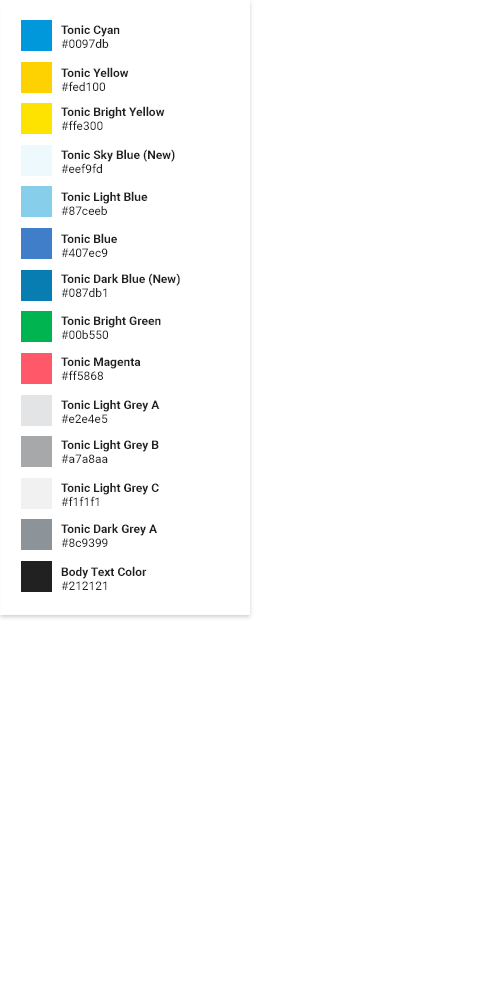
<style>
.page{position:relative;width:500px;height:1000px;background:#ffffff}
.page>*{position:absolute;margin:0}
.t1{font:12px "Roboto-Bold";color:#212121}
.t2{font:12px "Roboto-Regular";color:#212121}
</style>
<div class="page">
<p class="t1" style="left:61px;top:25px;width:59px;height:12px">Tonic Cyan</p>
<p class="t2" style="left:61px;top:39px;width:48px;height:9px">#0097db</p>
<p class="t1" style="left:61px;top:67px;width:68px;height:10px">Tonic Yellow</p>
<p class="t2" style="left:61px;top:81px;width:44px;height:10px">#fed100</p>
<p class="t1" style="left:61px;top:106px;width:104px;height:13px">Tonic Bright Yellow</p>
<p class="t2" style="left:61px;top:120px;width:42px;height:10px">#ffe300</p>
<p class="t1" style="left:61px;top:149px;width:114px;height:13px">Tonic Sky Blue (New)</p>
<p class="t2" style="left:61px;top:163px;width:41px;height:10px">#eef9fd</p>
<p class="t1" style="left:61px;top:191px;width:87px;height:13px">Tonic Light Blue</p>
<p class="t2" style="left:61px;top:206px;width:46px;height:9px">#87ceeb</p>
<p class="t1" style="left:61px;top:233px;width:56px;height:10px">Tonic Blue</p>
<p class="t2" style="left:61px;top:248px;width:47px;height:9px">#407ec9</p>
<p class="t1" style="left:61px;top:273px;width:119px;height:13px">Tonic Dark Blue (New)</p>
<p class="t2" style="left:61px;top:288px;width:46px;height:9px">#087db1</p>
<p class="t1" style="left:61px;top:316px;width:100px;height:12px">Tonic Bright Green</p>
<p class="t2" style="left:61px;top:330px;width:47px;height:9px">#00b550</p>
<p class="t1" style="left:61px;top:357px;width:80px;height:12px">Tonic Magenta</p>
<p class="t2" style="left:61px;top:370px;width:42px;height:10px">#ff5868</p>
<p class="t1" style="left:61px;top:400px;width:99px;height:12px">Tonic Light Grey A</p>
<p class="t2" style="left:61px;top:414px;width:47px;height:9px">#e2e4e5</p>
<p class="t1" style="left:61px;top:440px;width:98px;height:12px">Tonic Light Grey B</p>
<p class="t2" style="left:61px;top:454px;width:47px;height:9px">#a7a8aa</p>
<p class="t1" style="left:61px;top:483px;width:98px;height:12px">Tonic Light Grey C</p>
<p class="t2" style="left:61px;top:496px;width:38px;height:10px">#f1f1f1</p>
<p class="t1" style="left:61px;top:523px;width:96px;height:13px">Tonic Dark Grey A</p>
<p class="t2" style="left:61px;top:538px;width:47px;height:9px">#8c9399</p>
<p class="t1" style="left:61px;top:566px;width:86px;height:13px">Body Text Color</p>
<p class="t2" style="left:61px;top:581px;width:46px;height:9px">#212121</p>
</div>
